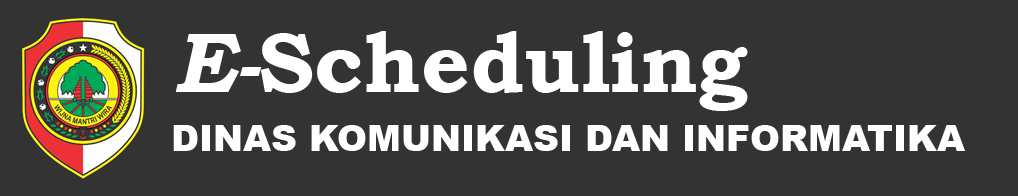
<style>
.page{position:relative;width:1018px;height:196px;background:#333333}
.page>*{position:absolute;margin:0}
.t1{font:85px "BookmanOldStyle-Bold";color:#ffffff}
.t2{font:85px "BookmanOldStyle-BoldItalic";color:#ffffff}
.t3{font:36px "Arial-Black";color:#ffffff}
</style>
<div class="page">
<p class="t1" style="left:175px;top:31px;width:573px;height:80px"><span class="t2">E-</span>Scheduling</p>
<p class="t3" style="left:173px;top:125px;width:792px;height:26px">DINAS KOMUNIKASI DAN INFORMATIKA</p>
</div>
